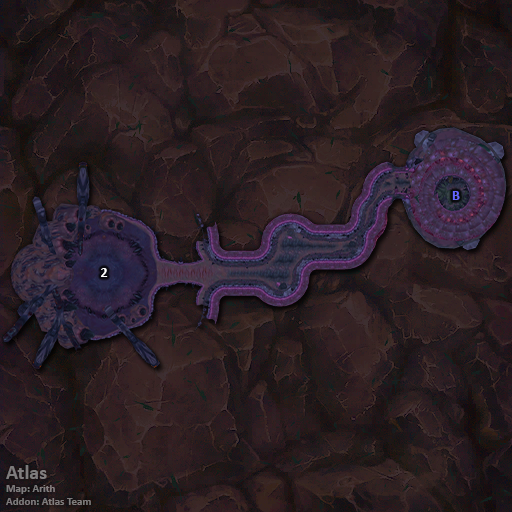
<style>
.page{position:relative;width:512px;height:512px}
.page>*{position:absolute;margin:0}
.t1{font:14px "Calibri-Bold";color:#6666ff}
.t2{font:14px "Calibri-Bold";color:#ffffff}
.t3{font:11px "Calibri-Bold";color:#7e7b7c}
.t4{font:20px "Calibri-Bold";color:#7e7b7c}
</style>
<div class="page">
<p class="t1" style="left:452px;top:191px;width:8px;height:9px">B</p>
<p class="t2" style="left:101px;top:268px;width:7px;height:9px">2</p>
<p class="t3" style="left:6px;top:465px;width:85px;height:40px"><span class="t4">Atlas<br></span>Map: Arith<br>Addon: Atlas Team</p>
</div>
